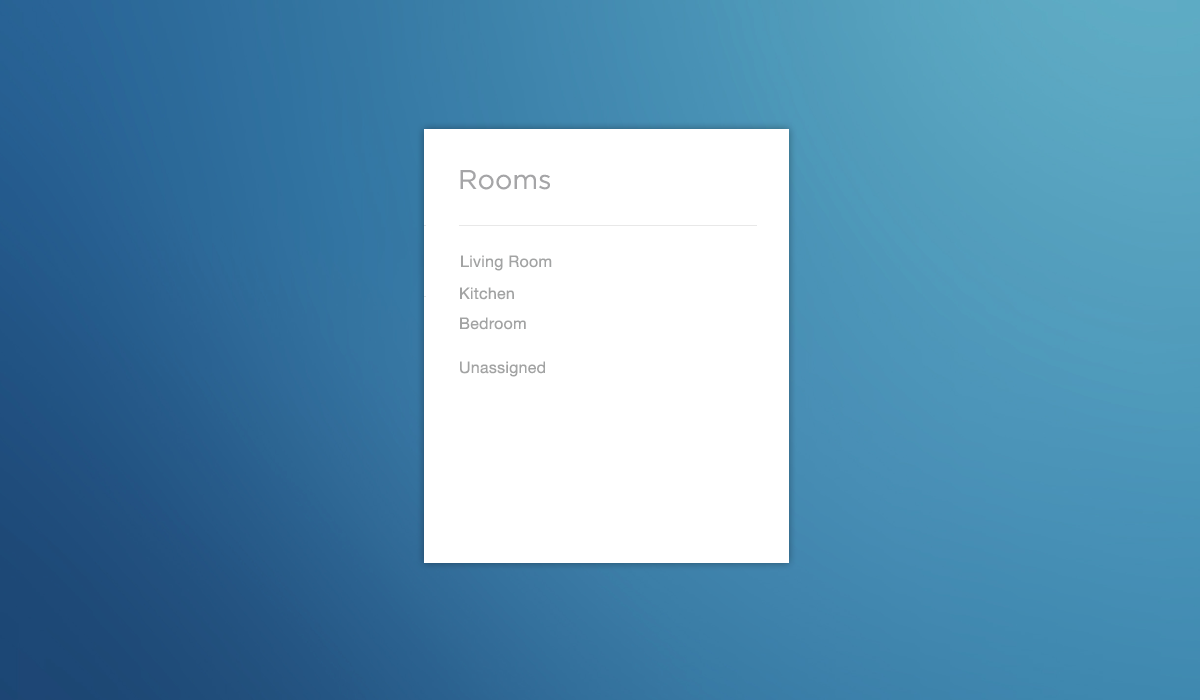
<style>
.page{position:relative;width:1200px;height:700px}
.page>*{position:absolute;margin:0}
.t1{font:27px "GothamBook";color:#a5a5a7}
.t2{font:16px "HelveticaNeue";letter-spacing:0.016em;color:#a2a3a3}
</style>
<div class="page">
<p class="t1" style="left:460px;top:170px;width:90px;height:20px">Rooms</p>
<p class="t2" style="left:461px;top:255px;width:91px;height:16px">Living Room</p>
<p class="t2" style="left:460px;top:287px;width:54px;height:13px">Kitchen</p>
<p class="t2" style="left:460px;top:317px;width:66px;height:13px">Bedroom</p>
<p class="t2" style="left:460px;top:361px;width:85px;height:16px">Unassigned</p>
</div>
